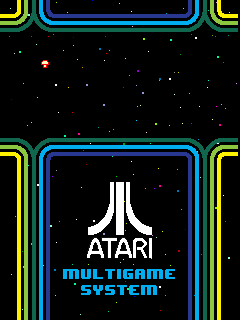
<style>
.page{position:relative;width:240px;height:320px;background:#000000}
.page>*{position:absolute;margin:0}
.t1{font:12px "8BITWONDERNominal";color:#00aeef}
</style>
<div class="page">
<p class="t1" style="left:63px;top:269px;width:112px;height:10px">MULTIGAME</p>
<p class="t1" style="left:81px;top:285px;width:76px;height:10px">SYSTEM</p>
</div>
